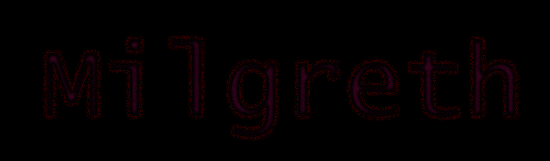
<style>
.page{position:relative;width:550px;height:161px;background:#000000}
.page>*{position:absolute;margin:0}
.t1{font:100px "LucidaConsole";color:#140303}
</style>
<div class="page">
<p class="t1" style="left:46px;top:39px;width:470px;height:98px">Milgreth</p>
</div>
